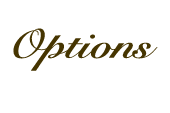
<style>
.page{position:relative;width:170px;height:113px;background:#ffffff}
.page>*{position:absolute;margin:0}
.t1{font:40.2px "SnellRoundhand-Bold";color:#463501;scale:1.14 1}
</style>
<div class="page">
<p class="t1" style="left:13px;top:28px;width:145px;height:43px">Options</p>
</div>
